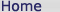
<style>
.page{position:relative;width:60px;height:12px}
.page>*{position:absolute;margin:0}
.t1{font:14px "Verdana";color:#292765}
</style>
<div class="page">
<p class="t1" style="left:2px;top:0px;width:40px;height:12px">Home</p>
</div>
